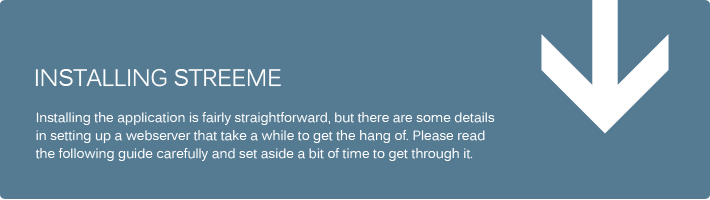
<style>
.page{position:relative;width:710px;height:200px;background:#547b92}
.page>*{position:absolute;margin:0}
.t1{font:23.7px "Kalinga";letter-spacing:-0.025em;color:#fefefe;text-transform:uppercase}
.t2{font:13px/18px "Kalinga";color:#fefefe}
</style>
<div class="page">
<p class="t1" style="left:35px;top:68px;width:246px;height:19px">INSTALLING STREEME</p>
<p class="t2" style="left:35px;top:112px;width:460px;height:49px">Installing the application is fairly straightforward, but there are some details in setting up a webserver that take a while to get the hang of. Please read the following guide carefully and set aside a bit of time to get through it.</p>
</div>
